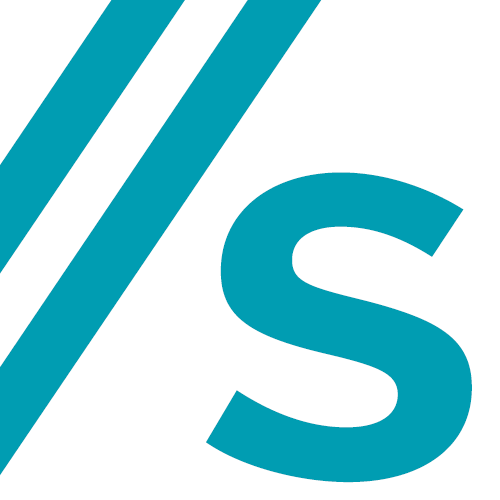
<style>
.page{position:relative;width:500px;height:500px;background:#ffffff}
.page>*{position:absolute;margin:0}
.t1{font:569px "Raleway-Bold";letter-spacing:-0.05em;color:#009db2}
</style>
<div class="page">
<p class="t1" style="left:206px;top:172px;width:266px;height:311px">s</p>
</div>
